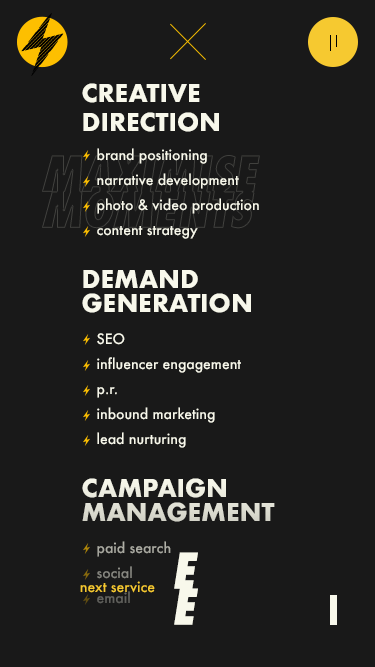
<style>
.page{position:relative;width:375px;height:667px;background:#191919}
.page>*{position:absolute;margin:0}
.t1{font:24px "Futura-Bold";color:#f8f8eb}
.t2{font:14px "Futura-Medium";color:#f8f8eb}
.t3{font:24px/24px "Futura-Bold";color:#f8f8eb}
.t4{font:24px/24px "Futura-Bold";color:#e1e1d6;text-transform:uppercase}
.t5{font:14px "Futura-Medium";color:#aaaaa2}
.t6{font:48px/36px "Futura-CondExtraBoldObl";color:#f8f8eb;text-transform:uppercase}
.t7{font:14px "Futura-Medium";color:#84847d}
.t8{font:14px "Futura-Medium";color:#f6c930}
.t9{font:14px "Futura-Medium";color:#62625d}
</style>
<div class="page">
<p class="t1" style="left:82px;top:83px;width:137px;height:49px">CREATIVE DIRECTION</p>
<p class="t2" style="left:97px;top:148px;width:110px;height:16px">brand positioning</p>
<p class="t2" style="left:97px;top:173px;width:142px;height:16px">narrative development</p>
<p class="t2" style="left:97px;top:198px;width:162px;height:16px">photo &amp; video production</p>
<p class="t2" style="left:97px;top:226px;width:101px;height:13px">content strategy</p>
<p class="t3" style="left:82px;top:270px;width:169px;height:43px">DEMAND GENERATION</p>
<p class="t2" style="left:97px;top:333px;width:28px;height:12px">SEO</p>
<p class="t2" style="left:97px;top:357px;width:144px;height:16px">influencer engagement</p>
<p class="t2" style="left:97px;top:387px;width:20px;height:11px">p.r.</p>
<p class="t2" style="left:97px;top:407px;width:118px;height:16px">inbound marketing</p>
<p class="t2" style="left:97px;top:432px;width:89px;height:16px">lead nurturing</p>
<p class="t4" style="left:82px;top:478px;width:193px;height:44px">campaign<br>management</p>
<p class="t5" style="left:97px;top:541px;width:74px;height:16px">paid search</p>
<p class="t6" style="left:174px;top:552px;width:24px;height:73px;text-align:right">E<br>E</p>
<p class="t7" style="left:97px;top:566px;width:35px;height:13px">social</p>
<p class="t8" style="left:80px;top:581px;width:75px;height:12px">next service</p>
<p class="t9" style="left:97px;top:591px;width:33px;height:13px">email</p>
</div>
